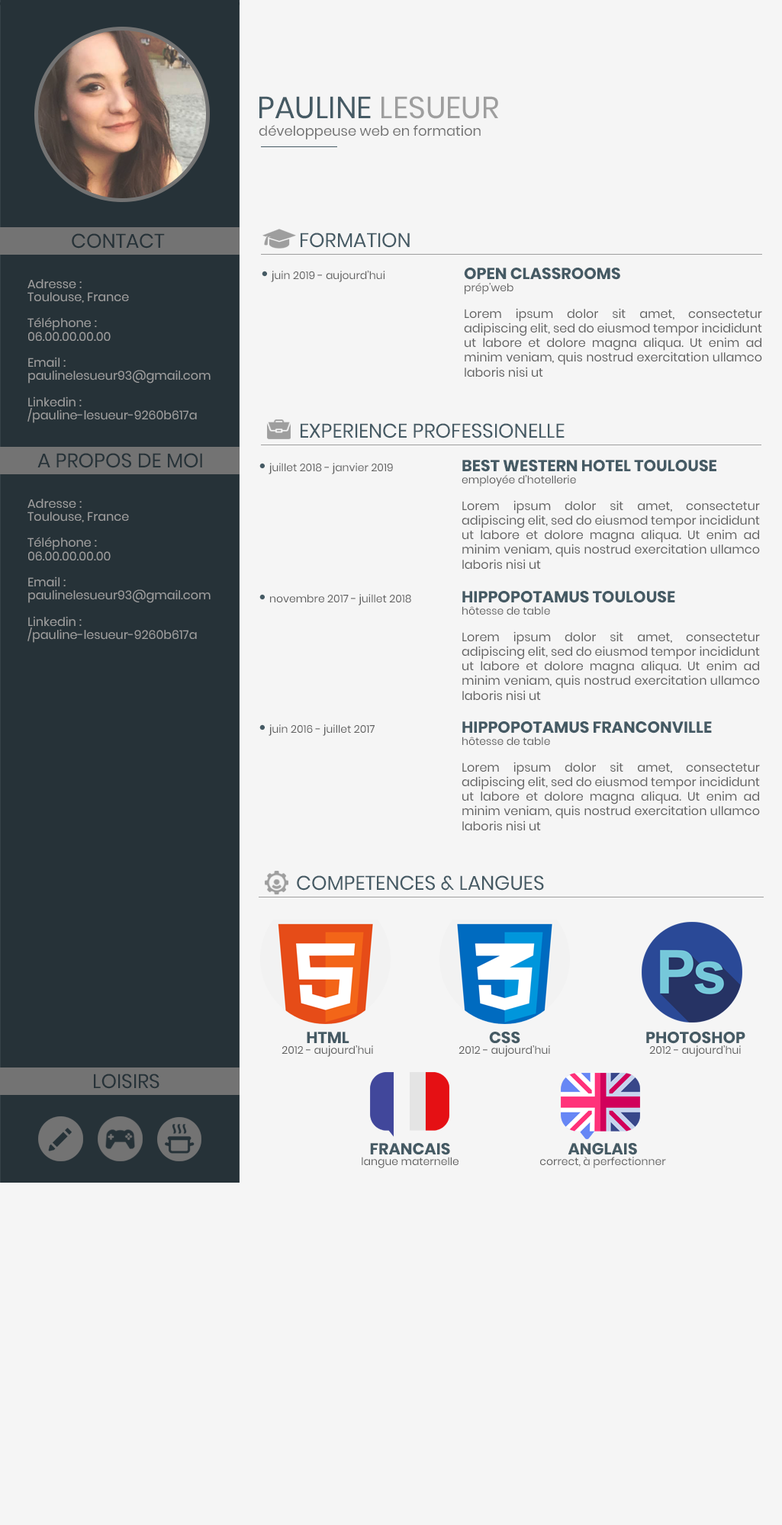
<style>
.page{position:relative;width:782px;height:1525px;background:#f5f5f5}
.page>*{position:absolute;margin:0}
.t1{font:30.5px "Poppins-Regular";color:#455a64}
.t2{font:30.5px "Poppins-Regular";color:#9e9e9e}
.t3{font:13.7px "Poppins-Regular";color:#737373}
.t4{font:19.8px "Poppins-Regular";color:#263238}
.t5{font:19.8px "Poppins-Regular";color:#455a64}
.t6{font:16px "Poppins-Bold";color:#455a64}
.t7{font:12.2px "Poppins-Regular";color:#9e9e9e}
.t8{font:10.7px "Poppins-Regular";color:#616161}
.t9{font:12.2px "Poppins-Regular";color:#616161}
</style>
<div class="page">
<p class="t1" style="left:259px;top:96px;width:239px;height:23px">PAULINE<span class="t2"> LESUEUR</span></p>
<p class="t3" style="left:259px;top:125px;width:221px;height:15px">développeuse web en formation</p>
<p class="t4" style="left:72px;top:233px;width:93px;height:16px">CONTACT</p>
<p class="t5" style="left:300px;top:233px;width:110px;height:15px">FORMATION</p>
<p class="t6" style="left:464px;top:268px;width:156px;height:12px">OPEN CLASSROOMS</p>
<p class="t7" style="left:27px;top:279px;width:183px;height:144px;text-align:justify">Adresse : <br>Toulouse, France<br><br>Téléphone :<br>06.00.00.00.00<br><br>Email :<br>paulinelesueur93@gmail.com<br><br>Linkedin :<br>/pauline-lesueur-9260b617a</p>
<p class="t8" style="left:262px;top:271px;width:123px;height:11px"><span class="t6">• </span>juin 2019 - aujourd’hui</p>
<p class="t9" style="left:464px;top:283px;width:298px;height:95px;text-align:justify"><span class="t8">prép’web<br></span><br>Lorem ipsum dolor sit amet, consectetur adipiscing elit, sed do eiusmod tempor incididunt ut labore et dolore magna aliqua. Ut enim ad minim veniam, quis nostrud exercitation ullamco laboris nisi ut</p>
<p class="t5" style="left:300px;top:423px;width:264px;height:16px">EXPERIENCE PROFESSIONELLE</p>
<p class="t4" style="left:37px;top:453px;width:165px;height:15px">A PROPOS DE MOI</p>
<p class="t6" style="left:462px;top:460px;width:254px;height:12px">BEST WESTERN HOTEL TOULOUSE</p>
<p class="t8" style="left:259px;top:463px;width:134px;height:11px"><span class="t6">• </span>juillet 2018 - janvier 2019</p>
<p class="t9" style="left:461px;top:475px;width:299px;height:95px;text-align:justify"><span class="t8">employée d’hotellerie<br></span><br>Lorem ipsum dolor sit amet, consectetur adipiscing elit, sed do eiusmod tempor incididunt ut labore et dolore magna aliqua. Ut enim ad minim veniam, quis nostrud exercitation ullamco laboris nisi ut</p>
<p class="t7" style="left:27px;top:499px;width:183px;height:144px;text-align:justify">Adresse : <br>Toulouse, France<br><br>Téléphone :<br>06.00.00.00.00<br><br>Email :<br>paulinelesueur93@gmail.com<br><br>Linkedin :<br>/pauline-lesueur-9260b617a</p>
<p class="t6" style="left:462px;top:591px;width:213px;height:12px">HIPPOPOTAMUS TOULOUSE</p>
<p class="t8" style="left:259px;top:594px;width:152px;height:12px"><span class="t6">• </span>novembre 2017 - juillet 2018</p>
<p class="t9" style="left:461px;top:606px;width:299px;height:95px;text-align:justify"><span class="t8">hôtesse de table<br></span><br>Lorem ipsum dolor sit amet, consectetur adipiscing elit, sed do eiusmod tempor incididunt ut labore et dolore magna aliqua. Ut enim ad minim veniam, quis nostrud exercitation ullamco laboris nisi ut</p>
<p class="t8" style="left:259px;top:725px;width:115px;height:11px"><span class="t6">• </span>juin 2016 - juillet 2017</p>
<p class="t6" style="left:462px;top:721px;width:250px;height:13px">HIPPOPOTAMUS FRANCONVILLE</p>
<p class="t9" style="left:461px;top:737px;width:299px;height:94px;text-align:justify"><span class="t8">hôtesse de table<br></span><br>Lorem ipsum dolor sit amet, consectetur adipiscing elit, sed do eiusmod tempor incididunt ut labore et dolore magna aliqua. Ut enim ad minim veniam, quis nostrud exercitation ullamco laboris nisi ut</p>
<p class="t5" style="left:297px;top:876px;width:247px;height:15px">COMPETENCES &amp; LANGUES</p>
<p class="t8" style="left:281px;top:1032px;width:92px;height:25px;text-align:center"><span class="t6">HTML<br></span>2012 - aujourd’hui</p>
<p class="t8" style="left:458px;top:1032px;width:92px;height:25px;text-align:center"><span class="t6">CSS<br></span>2012 - aujourd’hui</p>
<p class="t8" style="left:646px;top:1032px;width:99px;height:25px;text-align:center"><span class="t6">PHOTOSHOP<br></span>2012 - aujourd’hui</p>
<p class="t4" style="left:94px;top:1074px;width:65px;height:15px">LOISIRS</p>
<p class="t8" style="left:362px;top:1143px;width:96px;height:25px;text-align:center"><span class="t6">FRANCAIS<br></span>langue maternelle</p>
<p class="t8" style="left:540px;top:1143px;width:126px;height:25px;text-align:center"><span class="t6">ANGLAIS<br></span>correct, à perfectionner</p>
</div>
